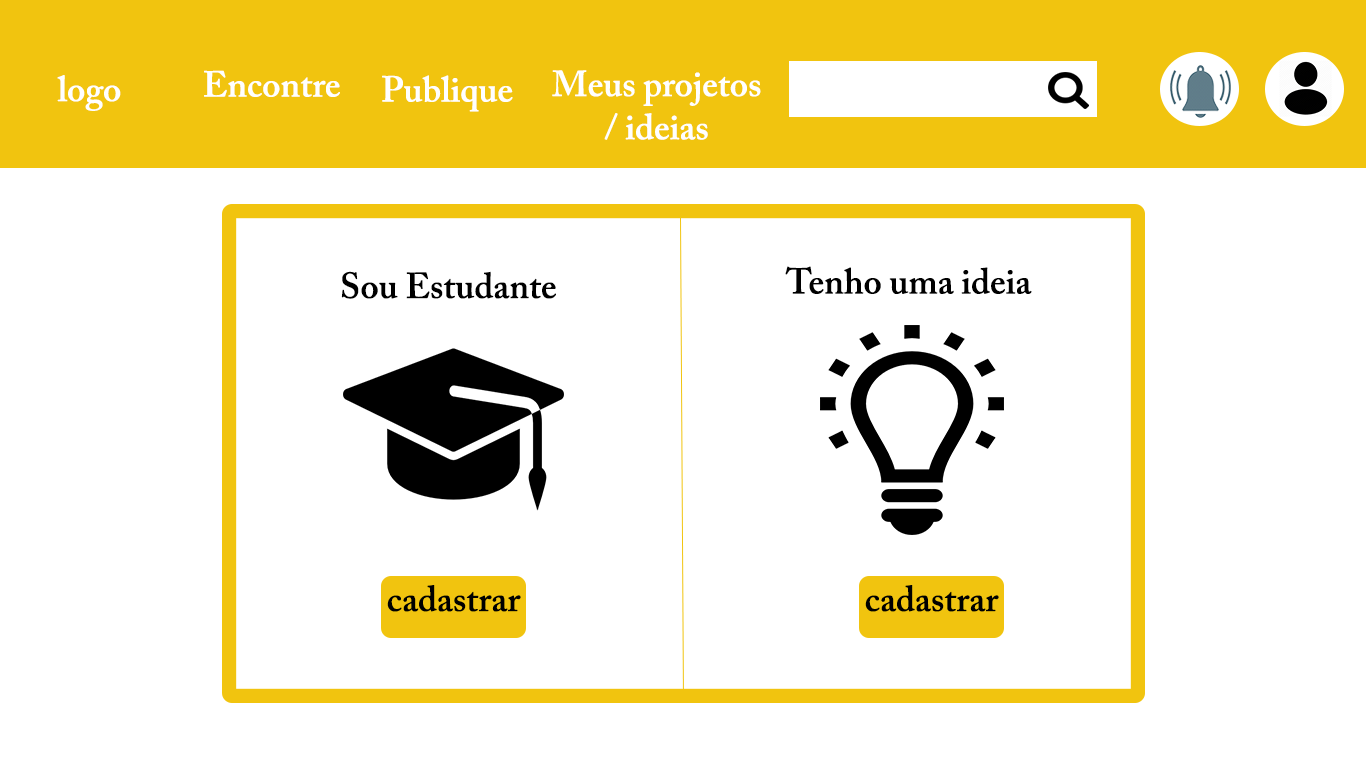
<style>
.page{position:relative;width:1366px;height:768px;background:#ffffff}
.page>*{position:absolute;margin:0}
.t1{font:36px "ACaslonPro-Semibold";color:#ffffff}
.t2{font:36px "ACaslonPro-Semibold";color:#000000}
</style>
<div class="page">
<p class="t1" style="left:57px;top:75px;width:64px;height:36px">logo</p>
<p class="t1" style="left:204px;top:70px;width:136px;height:27px">Encontre</p>
<p class="t1" style="left:382px;top:75px;width:131px;height:37px">Publique</p>
<p class="t1" style="left:552px;top:70px;width:209px;height:70px;text-align:center">Meus projetos<br>/ ideias</p>
<p class="t2" style="left:785px;top:266px;width:247px;height:28px">Tenho uma ideia</p>
<p class="t2" style="left:341px;top:271px;width:215px;height:28px">Sou Estudante</p>
</div>
